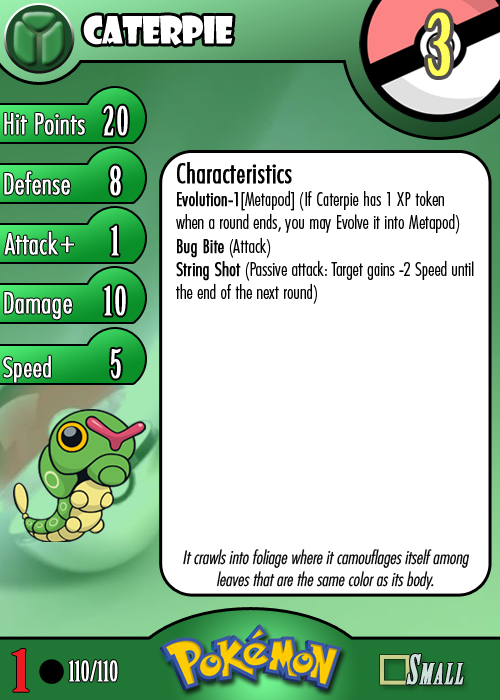
<style>
.page{position:relative;width:500px;height:700px;background:#ffffff}
.page>*{position:absolute;margin:0}
.t1{font:36.7px "ShowcardGothic-Reg";letter-spacing:-0.025em;color:#ffffff;scale:0.91 1}
.t2{font:83.3px "BirchStd";letter-spacing:0.025em;color:#fffd59;font-weight:bold}
.t3{font:27.8px "Futura-CondensedLight";color:#ffffff;font-weight:bold}
.t4{font:38.9px "BirchStd";letter-spacing:0.035em;color:#ffffff;font-weight:bold}
.t5{font:19.4px "FuturaCondensedBQ-Light";color:#010101}
.t6{font:27.8px "FuturaCondensedBQ-Light";color:#010101;font-weight:bold}
.t7{font:19.4px "FuturaCondensedBQ-Light";color:#010101;font-weight:bold}
.t8{font:30.6px "Futura-CondensedLight";color:#ffffff;font-weight:bold}
.t9{font:27.8px "FuturaCondensedBQ-Light";color:#ffffff;font-weight:bold}
.t10{font:18.1px "Futura-CondensedLight";color:#010101;font-style:italic}
.t11{font:55.6px "BirchStd";color:#ed1c24;font-weight:bold;scale:1.5 1}
.t12{font:27.8px "BirchStd";color:#ffffff;font-weight:bold}
</style>
<div class="page">
<p class="t1" style="left:83px;top:15px;width:150px;height:31px">caterpie</p>
<p class="t2" style="left:428px;top:12px;width:22px;height:64px">3</p>
<p class="t3" style="left:4px;top:113px;width:81px;height:22px">Hit Points</p>
<p class="t4" style="left:103px;top:105px;width:25px;height:31px">20</p>
<p class="t3" style="left:4px;top:171px;width:66px;height:24px">Defense</p>
<p class="t4" style="left:110px;top:165px;width:11px;height:31px">8</p>
<p class="t5" style="left:176px;top:162px;width:298px;height:142px"><span class="t6">Characteristics<br></span><span class="t7">Evolution-1</span>[Metapod] (If Caterpie has 1 XP token when a round ends, you may Evolve it into Metapod)<br><span class="t7">Bug Bite</span> (Attack)<br><span class="t7">String Shot</span> (Passive attack: Target gains -2 Speed until the end of the next round)</p>
<p class="t3" style="left:4px;top:231px;width:54px;height:24px">Attack</p>
<p class="t4" style="left:111px;top:225px;width:8px;height:31px">1</p>
<p class="t8" style="left:60px;top:236px;width:14px;height:17px">+</p>
<p class="t3" style="left:4px;top:292px;width:68px;height:28px">Damage</p>
<p class="t4" style="left:104px;top:285px;width:22px;height:31px">10</p>
<p class="t4" style="left:111px;top:348px;width:10px;height:31px">5</p>
<p class="t9" style="left:3px;top:355px;width:48px;height:28px">Speed</p>
<p class="t10" style="left:183px;top:549px;width:286px;height:41px;text-align:center">It crawls into foliage where it camouflages itself among leaves that are the same color as its body.</p>
<p class="t11" style="left:12px;top:649px;width:17px;height:43px">1</p>
<p class="t12" style="left:68px;top:660px;width:50px;height:22px">110/110</p>
</div>
